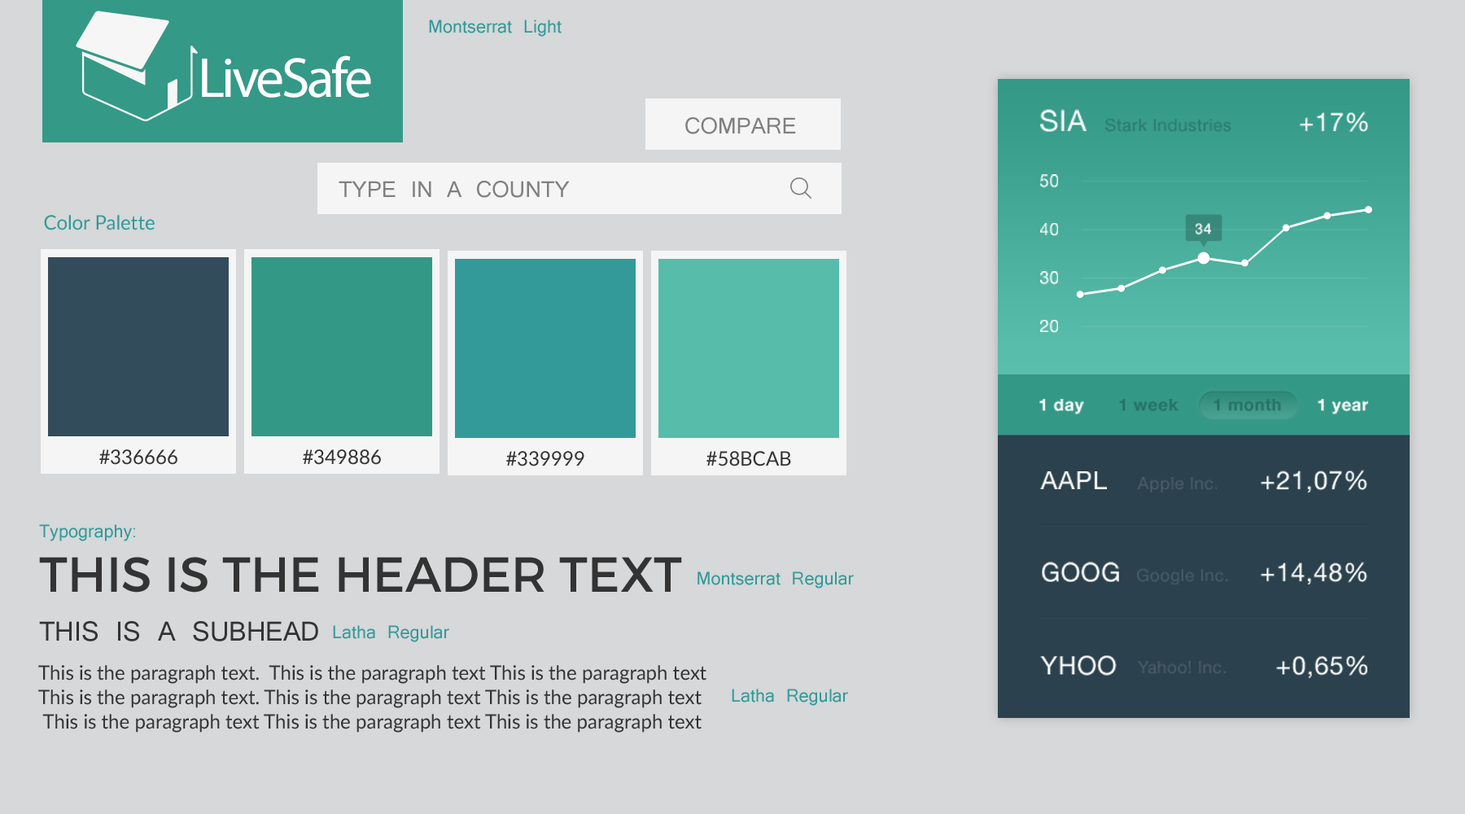
<style>
.page{position:relative;width:1465px;height:814px;background:#d6d8d9}
.page>*{position:absolute;margin:0}
.t1{font:19.5px "Latha";color:#339999}
.t2{font:56.9px "MyriadPro-Regular";letter-spacing:-0.05em;color:#fefefe}
.t3{font:29px "HelveticaNeue";letter-spacing:0.03em;color:#ffffff}
.t4{font:25.4px "HelveticaNeue";letter-spacing:0.03em;color:#ffffff}
.t5{font:24.4px "Latha";letter-spacing:-0.005em;color:#808080;text-transform:uppercase}
.t6{font:16.9px "HelveticaNeue";letter-spacing:0.03em;color:#2a7a6b}
.t7{font:16.9px "HelveticaNeue";letter-spacing:0.03em;color:#ffffff}
.t8{font:19.5px "Lato-Regular";color:#339999}
.t9{font:14.5px "HelveticaNeue-Medium";letter-spacing:0.03em;color:#ffffff}
.t10{font:16.9px "HelveticaNeue-Bold";letter-spacing:0.03em;color:#ffffff}
.t11{font:16.9px "HelveticaNeue-Bold";letter-spacing:0.03em;color:#277264}
.t12{font:19.5px "Lato-Regular";color:#333333}
.t13{font:16.9px "HelveticaNeue";letter-spacing:0.03em;color:#4b5d68}
.t14{font:49px "Montserrat-Regular";color:#333333;text-transform:uppercase}
.t15{font:29.3px "Latha";color:#333333}
.t16{font:19.5px/24.4px "Lato-Regular";color:#333333}
</style>
<div class="page">
<p class="t1" style="left:429px;top:20px;width:133px;height:17px">Montserrat Light</p>
<p class="t2" style="left:202px;top:55px;width:169px;height:43px">LiveSafe</p>
<p class="t3" style="left:1040px;top:109px;width:47px;height:23px">SIA</p>
<p class="t4" style="left:1300px;top:112px;width:68px;height:20px">+17%</p>
<p class="t5" style="left:685px;top:117px;width:111px;height:17px">compare</p>
<p class="t6" style="left:1105px;top:118px;width:126px;height:14px">Stark Industries</p>
<p class="t5" style="left:339px;top:181px;width:231px;height:17px">type in a county</p>
<p class="t7" style="left:1040px;top:174px;width:18px;height:14px">50</p>
<p class="t8" style="left:44px;top:215px;width:111px;height:15px">Color Palette</p>
<p class="t7" style="left:1040px;top:223px;width:18px;height:13px">40</p>
<p class="t9" style="left:1196px;top:223px;width:15px;height:12px">34</p>
<p class="t7" style="left:1040px;top:271px;width:18px;height:14px">30</p>
<p class="t7" style="left:1040px;top:320px;width:18px;height:13px">20</p>
<p class="t10" style="left:1039px;top:399px;width:45px;height:15px">1 day</p>
<p class="t11" style="left:1119px;top:399px;width:60px;height:13px">1 week</p>
<p class="t11" style="left:1214px;top:399px;width:67px;height:13px">1 month</p>
<p class="t10" style="left:1318px;top:399px;width:50px;height:15px">1 year</p>
<p class="t12" style="left:99px;top:449px;width:78px;height:16px">#336666</p>
<p class="t12" style="left:303px;top:449px;width:78px;height:16px">#349886</p>
<p class="t12" style="left:506px;top:451px;width:78px;height:15px">#339999</p>
<p class="t12" style="left:706px;top:451px;width:85px;height:15px">#58BCAB</p>
<p class="t4" style="left:1040px;top:471px;width:67px;height:18px">AAPL</p>
<p class="t4" style="left:1261px;top:470px;width:106px;height:22px">+21,07%</p>
<p class="t13" style="left:1137px;top:477px;width:80px;height:15px">Apple Inc.</p>
<p class="t1" style="left:39px;top:524px;width:96px;height:17px">Typography:</p>
<p class="t14" style="left:39px;top:557px;width:643px;height:36px">This is the header text</p>
<p class="t4" style="left:1042px;top:562px;width:77px;height:20px">GOOG</p>
<p class="t13" style="left:1137px;top:568px;width:91px;height:16px">Google Inc.</p>
<p class="t4" style="left:1261px;top:562px;width:106px;height:22px">+14,48%</p>
<p class="t1" style="left:698px;top:571px;width:156px;height:17px">Montserrat Regular</p>
<p class="t15" style="left:39px;top:621px;width:279px;height:20px">THIS IS A SUBHEAD</p>
<p class="t1" style="left:333px;top:625px;width:116px;height:17px">Latha Regular</p>
<p class="t16" style="left:38px;top:665px;width:668px;height:68px">This is the paragraph text.  This is the paragraph text This is the paragraph text <br>This is the paragraph text. This is the paragraph text This is the paragraph text<br> This is the paragraph text This is the paragraph text This is the paragraph text</p>
<p class="t4" style="left:1040px;top:655px;width:77px;height:21px">YHOO</p>
<p class="t13" style="left:1137px;top:661px;width:89px;height:13px">Yahoo! Inc.</p>
<p class="t4" style="left:1276px;top:655px;width:91px;height:23px">+0,65%</p>
<p class="t1" style="left:732px;top:689px;width:116px;height:17px">Latha Regular</p>
</div>
